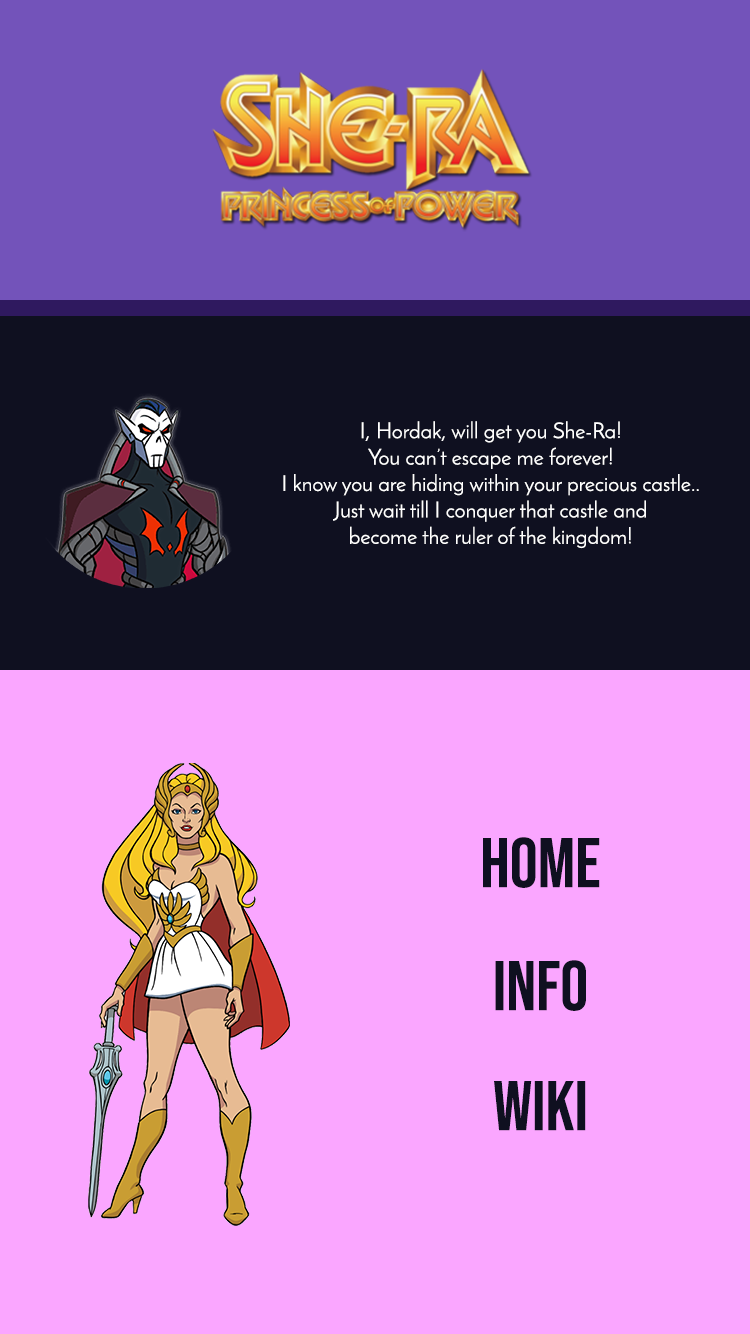
<style>
.page{position:relative;width:750px;height:1334px;background:#faa6ff}
.page>*{position:absolute;margin:0}
.t1{font:22px "JosefinSans";color:#ffffff}
.t2{font:70px "BebasNeue-Regular";color:#0f1020}
</style>
<div class="page">
<p class="t1" style="left:283px;top:421px;width:416px;height:128px;text-align:center">I, Hordak, will get you She-Ra!<br>You can’t escape me forever!<br>I know you are hiding within your precious castle.. <br>Just wait till I conquer that castle and <br>become the ruler of the kingdom!</p>
<p class="t2" style="left:483px;top:837px;width:117px;height:51px">Home</p>
<p class="t2" style="left:495px;top:960px;width:91px;height:51px">info</p>
<p class="t2" style="left:494px;top:1081px;width:92px;height:50px">wiki</p>
</div>
